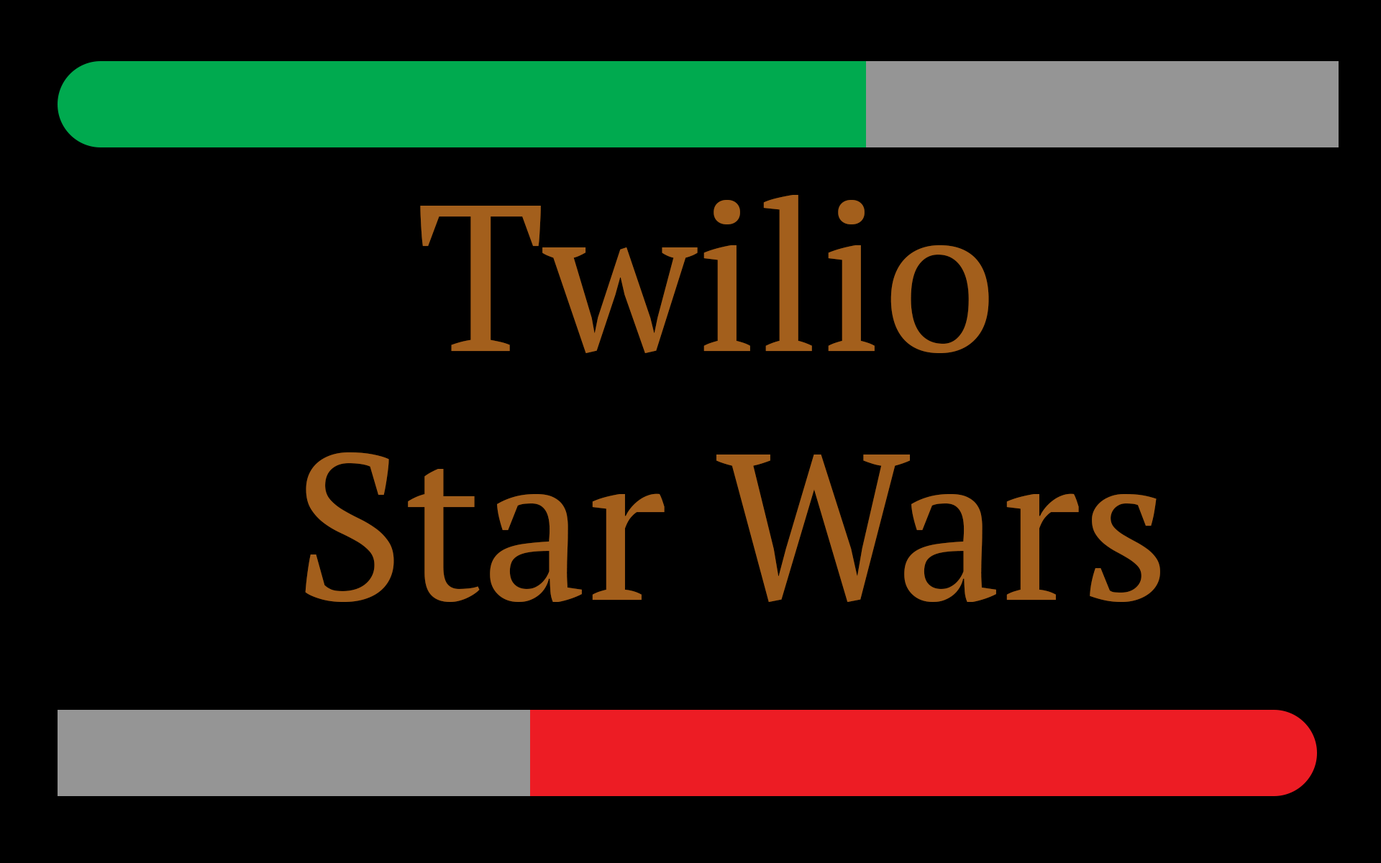
<style>
.page{position:relative;width:1381px;height:863px;background:#000000}
.page>*{position:absolute;margin:0}
.t1{font:207.2px "PTSerif-Regular";color:#a35f1c}
</style>
<div class="page">
<p class="t1" style="left:305px;top:195px;width:855px;height:407px;text-align:center">Twilio <br>Star Wars</p>
</div>
